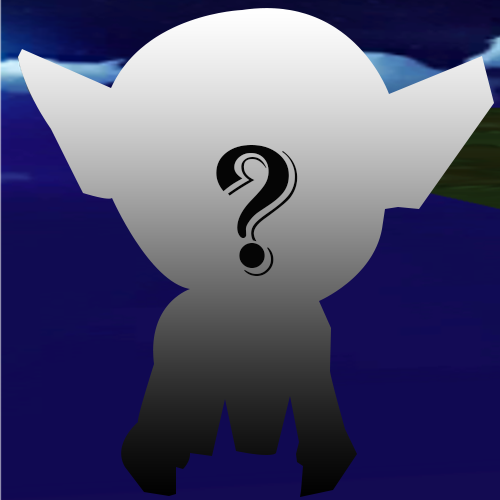
<style>
.page{position:relative;width:500px;height:500px}
.page>*{position:absolute;margin:0}
.t1{font:200px "Algerian";color:#050505}
</style>
<div class="page">
<p class="t1" style="left:216px;top:145px;width:82px;height:131px">?</p>
</div>
